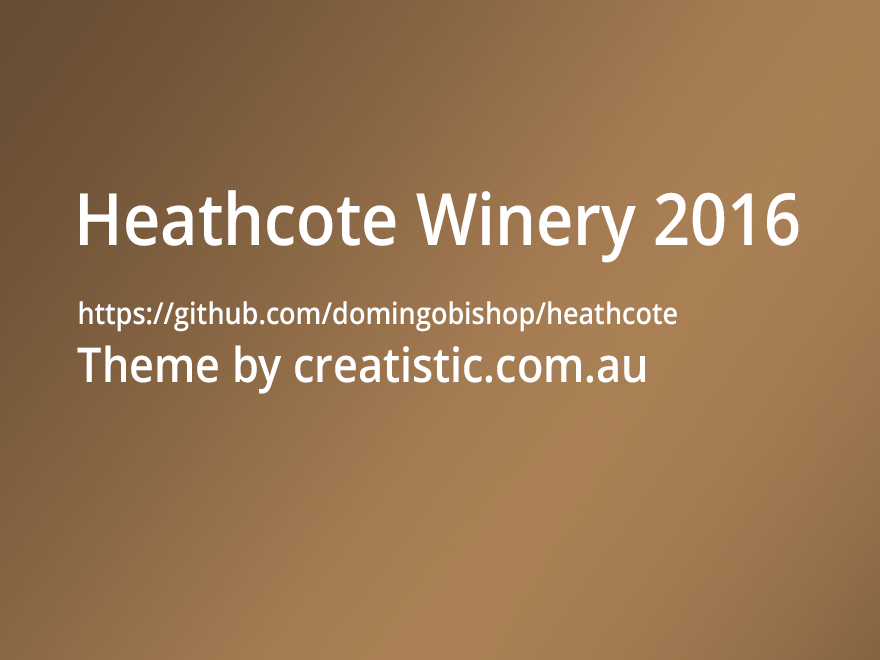
<style>
.page{position:relative;width:880px;height:660px}
.page>*{position:absolute;margin:0}
.t1{font:72px "OpenSans-Semibold";color:#ffffff;scale:0.9 1}
.t2{font:30px "OpenSans-Semibold";color:#ffffff;scale:0.9 1}
.t3{font:48px "OpenSans-Semibold";color:#ffffff;scale:0.9 1}
</style>
<div class="page">
<p class="t1" style="left:80px;top:190px;width:719px;height:73px">Heathcote Winery 2016</p>
<p class="t2" style="left:77px;top:301px;width:600px;height:93px">https://github.com/domingobishop/heathcote<br><span class="t3">Theme by creatistic.com.au</span></p>
</div>
